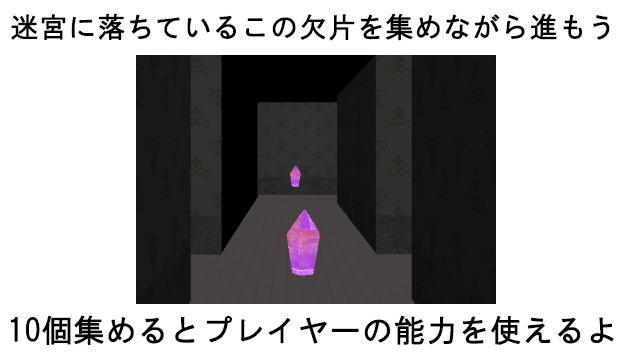
<style>
.page{position:relative;width:640px;height:360px;background:#ffffff}
.page>*{position:absolute;margin:0}
.t1{font:28.1px "HGGothicM";color:#000000;font-weight:bold}
.t2{font:31.2px "HGGothicM";color:#000000;font-weight:bold}
</style>
<div class="page">
<p class="t1" style="left:11px;top:13px;width:599px;height:28px">迷宮に落ちているこの欠片を集めながら進もう</p>
<p class="t2" style="left:10px;top:315px;width:604px;height:30px">10個集めるとプレイヤーの能力を使えるよ</p>
</div>
